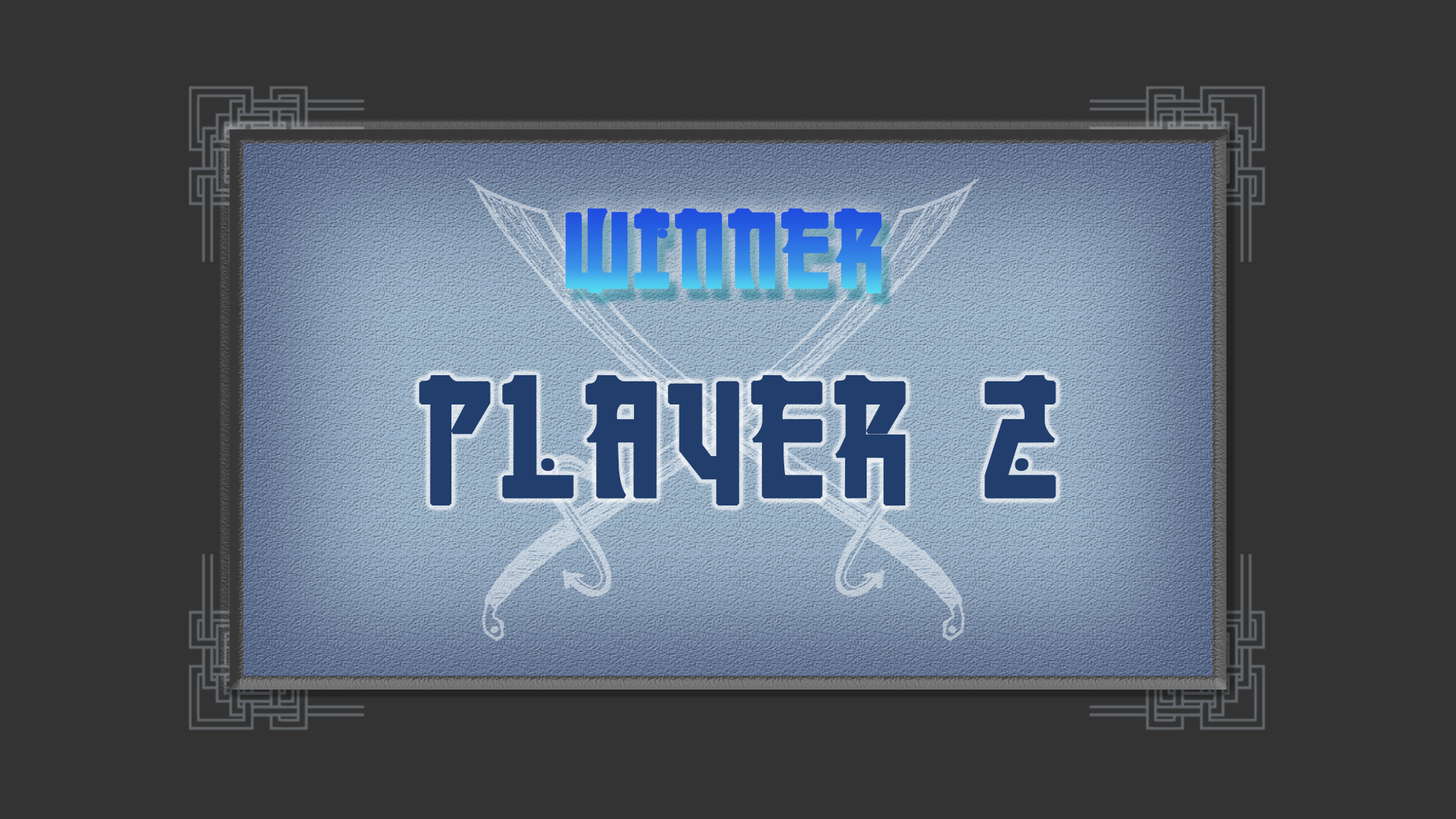
<style>
.page{position:relative;width:1456px;height:819px;background:#333333}
.page>*{position:absolute;margin:0}
.t1{font:102.7px "Manga";font-weight:bold}
.t2{font:160.5px "Manga";color:#213e6d;font-weight:bold}
</style>
<div class="page">
<p class="t1" style="left:565px;top:208px;width:317px;height:86px">WINNER</p>
<p class="t2" style="left:419px;top:374px;width:637px;height:132px">PLAYER 2</p>
</div>
